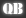
<style>
.page{position:relative;width:26px;height:18px;background:#ffffff}
.page>*{position:absolute;margin:0}
.t1{font:14px "StencilStd";letter-spacing:0.01em;color:#ffffff}
</style>
<div class="page">
<p class="t1" style="left:3px;top:3px;width:20px;height:12px">QB</p>
</div>
